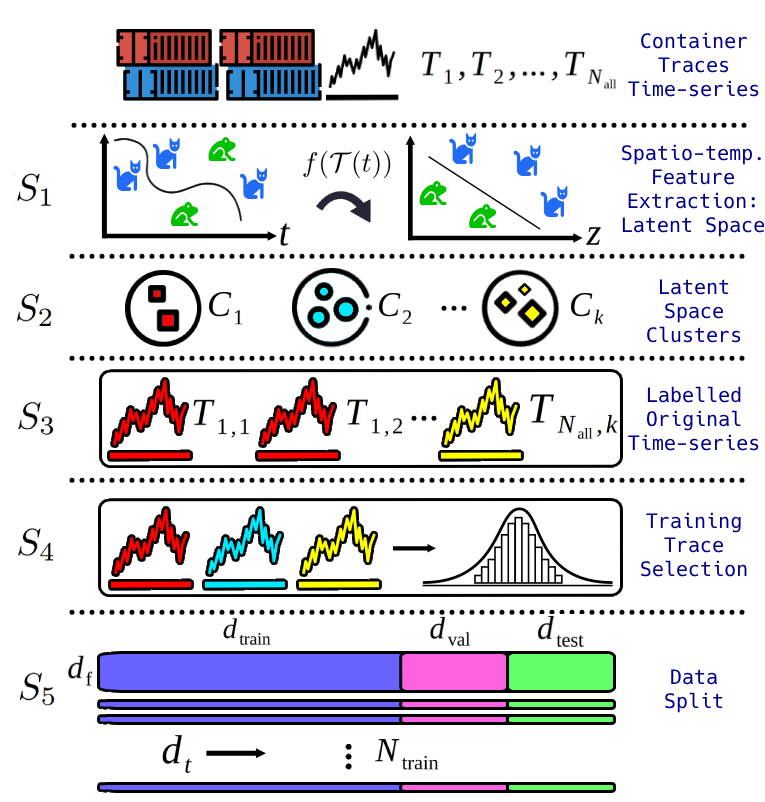
<style>
.page{position:relative;width:765px;height:802px;background:#ffffff}
.page>*{position:absolute;margin:0}
.t1{font:20px "Hack-Regular";color:#00008b}
.t2{font:20px "Hack-Regular";color:#ffffff}
</style>
<div class="page">
<p class="t1" style="left:628px;top:32px;width:131px;height:65px;text-align:center">Container<br>Traces<br>Time-series</p>
<p class="t1" style="left:622px;top:144px;width:143px;height:93px;text-align:center">Spatio-temp.<br>Feature<br>Extraction:<br>Latent Space</p>
<p class="t1" style="left:647px;top:279px;width:94px;height:64px;text-align:center">Latent<br>Space<br>Clusters</p>
<p class="t1" style="left:628px;top:386px;width:131px;height:65px;text-align:center">Labelled<br>Original<br>Time-series</p>
<p class="t1" style="left:641px;top:512px;width:106px;height:65px;text-align:center">Training<br>Trace<br>Selection</p>
<p class="t1" style="left:665px;top:669px;width:58px;height:44px;text-align:center"><span class="t2">D</span>ata<br>Split</p>
</div>
